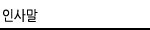
<style>
.page{position:relative;width:150px;height:30px;background:#ffffff}
.page>*{position:absolute;margin:0}
.t1{font:14px "NanumGothic";color:#000000;scale:0.9 1}
</style>
<div class="page">
<p class="t1" style="left:3px;top:9px;width:35px;height:13px">인사말</p>
</div>
